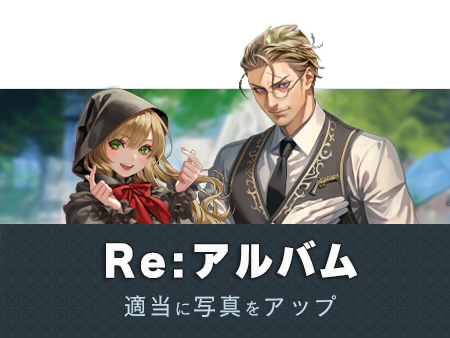
<style>
.page{position:relative;width:450px;height:338px;background:#ffffff}
.page>*{position:absolute;margin:0}
.t1{font:41px "Ruika-09";letter-spacing:0.1em;color:#fcfcfc;scale:0.95 1}
.t2{font:24.4px "CezanneProN-M";letter-spacing:0.1em;color:#c4dbe9;scale:0.95 1}
.t3{font:17.8px "CezanneProN-M";letter-spacing:0.1em;color:#c4dbe9;scale:0.95 1}
</style>
<div class="page">
<p class="t1" style="left:106px;top:240px;width:252px;height:39px">Re:アルバム</p>
<p class="t2" style="left:124px;top:295px;width:212px;height:22px">適当<span class="t3">に</span>写真<span class="t3">を</span>アップ</p>
</div>
